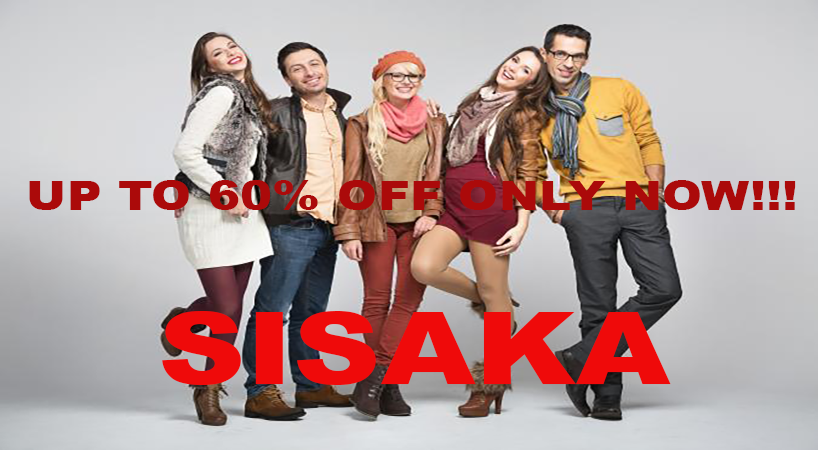
<style>
.page{position:relative;width:818px;height:450px}
.page>*{position:absolute;margin:0}
.t1{font:40px "Arial-Black";color:#ab0a0a;scale:1.21 1}
.t2{font:100px "Arial-Black";color:#ef0a0a;scale:1.21 1}
</style>
<div class="page">
<p class="t1" style="left:29px;top:180px;width:767px;height:30px">UP TO 60% OFF ONLY NOW!!!</p>
<p class="t2" style="left:162px;top:311px;width:509px;height:74px">SISAKA</p>
</div>
